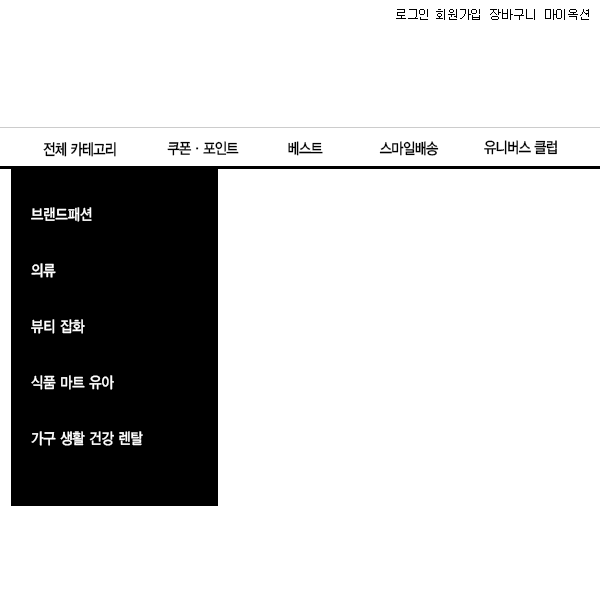
<style>
.page{position:relative;width:600px;height:600px;background:#ffffff}
.page>*{position:absolute;margin:0}
.t1{font:11.9px "Gulim";letter-spacing:-0.025em;color:#000000}
.t2{font:15.7px "YDIYGO330";letter-spacing:-0.05em;color:#000000;scale:0.84 1}
.t3{font:15.4px "YDIYGO330";letter-spacing:-0.05em;color:#000000;scale:0.86 1}
.t4{font:15.4px/56px "YDIYGO330";color:#ffffff;scale:0.86 1}
</style>
<div class="page">
<p class="t1" style="left:396px;top:9px;width:193px;height:11px">로그인 회원가입  장바구니  마이옥션</p>
<p class="t2" style="left:43px;top:142px;width:73px;height:15px">전체 카테고리</p>
<p class="t3" style="left:167px;top:141px;width:72px;height:15px">쿠폰·포인트</p>
<p class="t3" style="left:288px;top:141px;width:35px;height:15px">베스트</p>
<p class="t3" style="left:379px;top:141px;width:60px;height:15px">스마일배송</p>
<p class="t3" style="left:484px;top:140px;width:73px;height:15px">유니버스 클럽</p>
<p class="t4" style="left:31px;top:207px;width:112px;height:239px">브랜드패션<br>의류<br>뷰티 잡화<br>식품 마트 유아<br>가구 생활 건강 렌탈</p>
</div>
